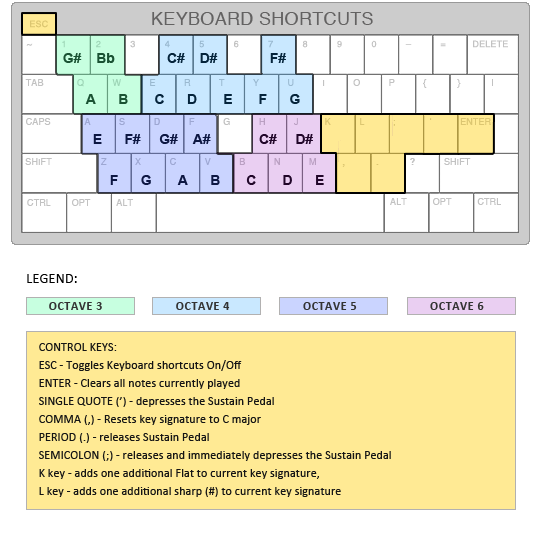
<style>
.page{position:relative;width:540px;height:551px;background:#ffffff}
.page>*{position:absolute;margin:0}
.t1{font:18px "Helvetica";letter-spacing:0.018em;color:#636262}
.t2{font:14px "Arial-BoldMT";letter-spacing:-0.01em}
.t3{font:9px "Helvetica";letter-spacing:0.01em;color:#c2c2c2}
.t4{font:14px "Calibri";letter-spacing:0.018em;color:#030303}
.t5{font:12px "Calibri-Bold";letter-spacing:0.05em;color:#333333}
.t6{font:12px/18px "Calibri";letter-spacing:0.01em;color:#151515}
</style>
<div class="page">
<p class="t1" style="left:152px;top:12px;width:221px;height:13px">KEYBOARD SHORTCUTS</p>
<p class="t2" style="left:63px;top:53px;width:223px;height:10px">G#    Bb              C#    D#              F#</p>
<p class="t2" style="left:85px;top:94px;width:215px;height:10px">A      B       C      D       E       F      G</p>
<p class="t2" style="left:93px;top:134px;width:220px;height:10px">E      F#     G#    A#             C#     D#</p>
<p class="t2" style="left:110px;top:175px;width:214px;height:10px">F      G       A      B       C       D      E</p>
<p class="t3" style="left:390px;top:198px;width:111px;height:7px">ALT          OPT          CTRL</p>
<p class="t3" style="left:27px;top:199px;width:106px;height:7px">CTRL        OPT          ALT</p>
<p class="t4" style="left:27px;top:274px;width:50px;height:9px">LEGEND:</p>
<p class="t5" style="left:49px;top:302px;width:435px;height:8px">OCTAVE 3                      OCTAVE 4                      OCTAVE 5                      OCTAVE 6</p>
<p class="t6" style="left:39px;top:343px;width:352px;height:154px">CONTROL KEYS:<br>ESC - Toggles Keyboard shortcuts On/Off<br>ENTER - Clears all notes currently played<br>SINGLE QUOTE (’) - depresses the Sustain Pedal<br>COMMA (,) - Resets key signature to C major<br>PERIOD (.) - releases Sustain Pedal<br>SEMICOLON (;) - releases and immediately depresses the Sustain Pedal<br>K key - adds one additional Flat to current key signature,<br>L key - adds one additional sharp (#) to current key signature</p>
</div>
